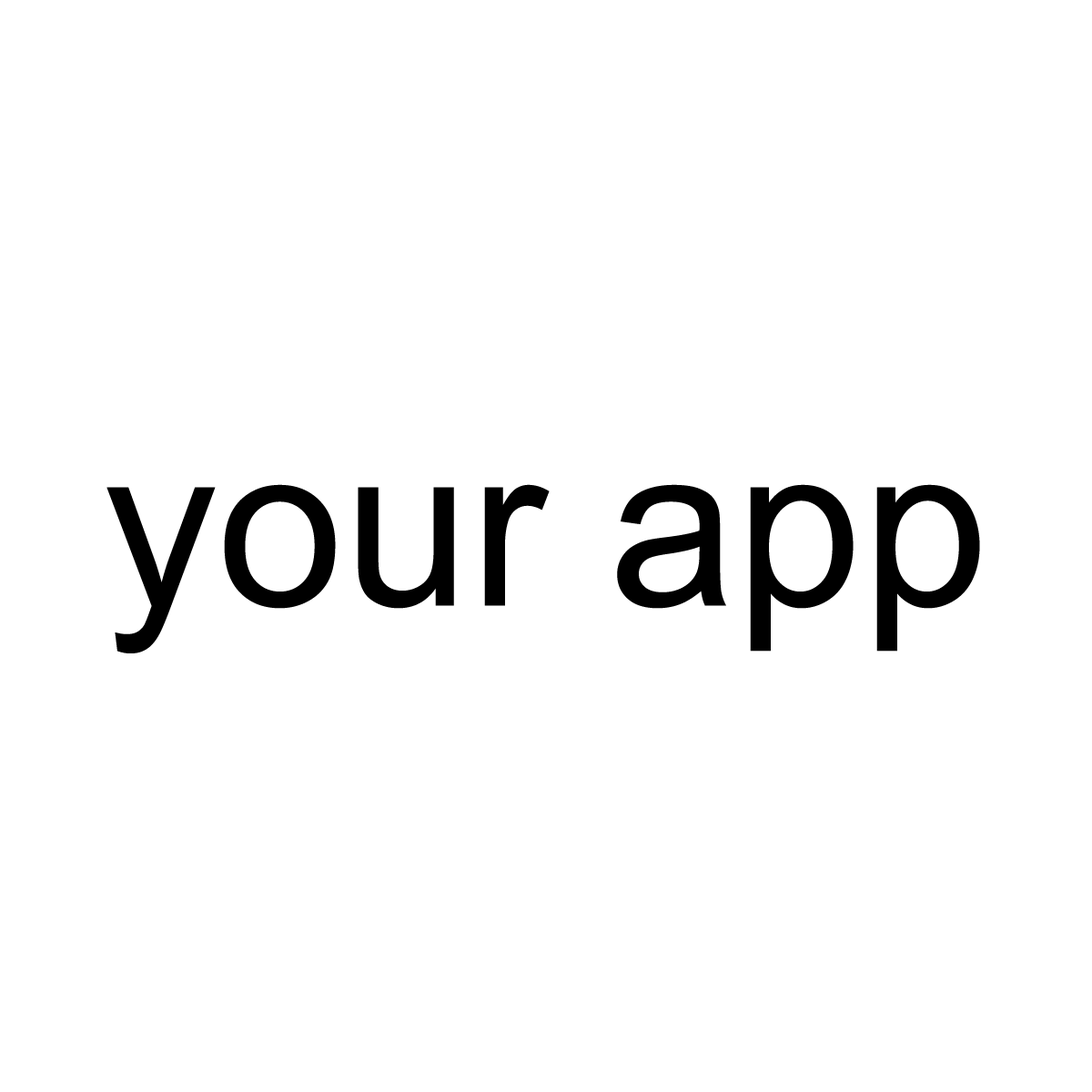
<style>
.page{position:relative;width:1092px;height:1092px;background:#ffffff}
.page>*{position:absolute;margin:0}
.t1{font:227.5px "ArialMT";color:#000000}
</style>
<div class="page">
<p class="t1" style="left:106px;top:484px;width:874px;height:169px">your app</p>
</div>
